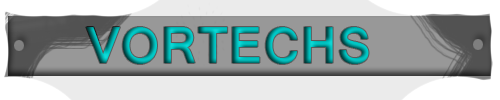
<style>
.page{position:relative;width:500px;height:100px;background:#ebebeb}
.page>*{position:absolute;margin:0}
.t1{font:48px "Kartika-Bold"}
</style>
<div class="page">
<p class="t1" style="left:86px;top:27px;width:283px;height:37px">VORTECHS</p>
</div>
